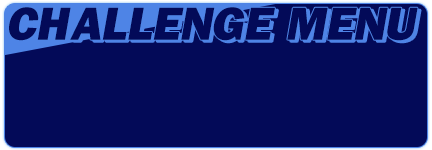
<style>
.page{position:relative;width:432px;height:150px;background:#030a58}
.page>*{position:absolute;margin:0}
.t1{font:48px "FranklinGothic-Heavy";letter-spacing:0.05em;color:#030a58;font-style:italic}
</style>
<div class="page">
<p class="t1" style="left:9px;top:7px;width:409px;height:34px">CHALLENGE MENU</p>
</div>
